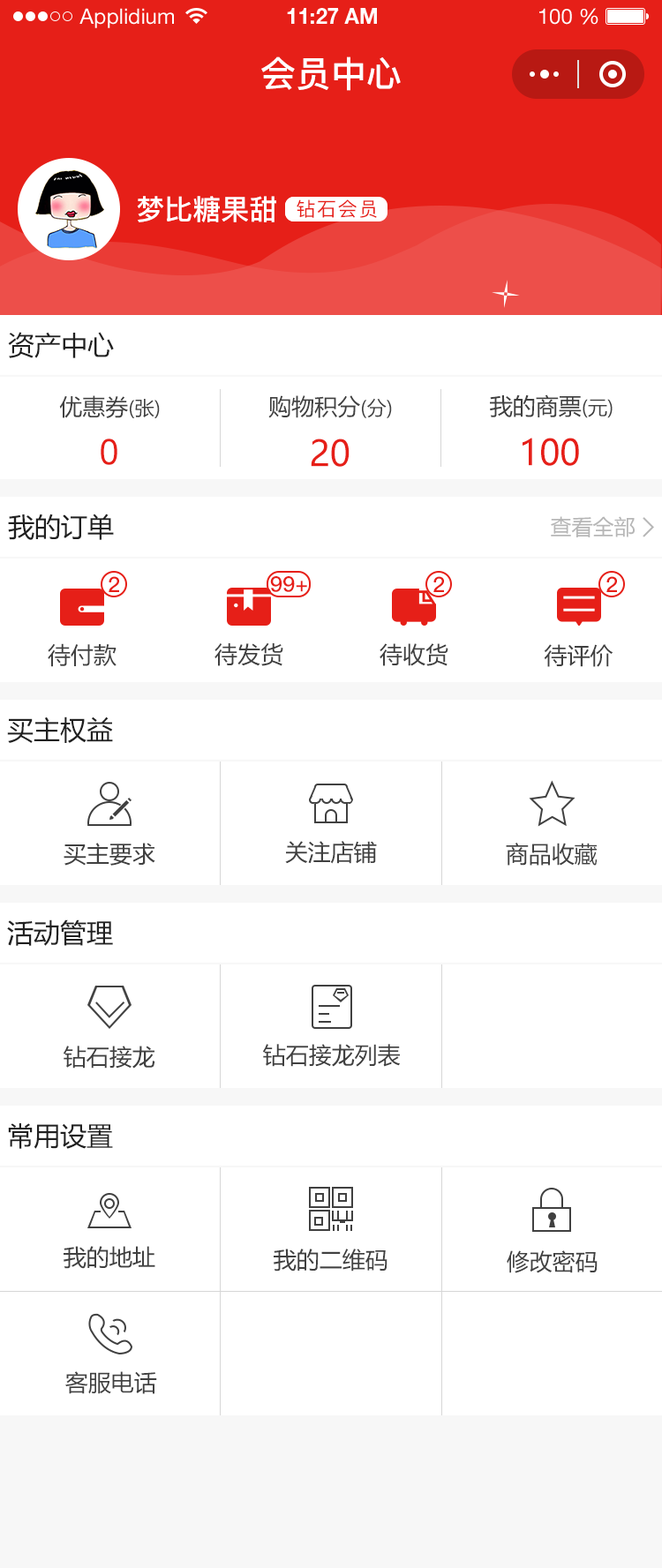
<style>
.page{position:relative;width:662px;height:1568px;background:#ffffff}
.page>*{position:absolute;margin:0}
.t1{font:21.2px "HelveticaNeueLTStd-Roman";color:#ffffff}
.t2{font:21.2px "HelveticaNeueLTStd-Bd";color:#ffffff}
.t3{font:35.3px "PingFang-SC-Bold";color:#ffffff;text-transform:uppercase}
.t4{font:28.2px "PingFang-SC-Bold";color:#ffffff;text-transform:uppercase}
.t5{font:19.4px "PingFang-SC-Medium";letter-spacing:0.08em;color:#e61f18}
.t6{font:26.5px "MicrosoftYaHei";color:#202020;text-transform:uppercase}
.t7{font:22.9px "MicrosoftYaHei";color:#404040;text-transform:uppercase}
.t8{font:19.4px "MicrosoftYaHei";color:#404040;text-transform:uppercase}
.t9{font:35.3px "MicrosoftYaHei";color:#e61f18;text-transform:uppercase}
.t10{font:35.3px "ArialMT";color:#e61f18;text-transform:uppercase}
.t11{font:21.2px "MicrosoftYaHei";color:#b6b6b6;text-transform:uppercase}
.t12{font:21.2px "PingFang-SC-Bold";color:#e61f18;text-transform:uppercase}
</style>
<div class="page">
<p class="t1" style="left:79px;top:8px;width:95px;height:20px">Applidium</p>
<p class="t2" style="left:287px;top:8px;width:90px;height:16px">11:27 AM</p>
<p class="t1" style="left:539px;top:8px;width:59px;height:17px">100 %</p>
<p class="t3" style="left:261px;top:56px;width:140px;height:35px">会员中心</p>
<p class="t4" style="left:137px;top:196px;width:139px;height:26px">梦比糖果甜</p>
<p class="t5" style="left:296px;top:199px;width:81px;height:19px">钻石会员</p>
<p class="t6" style="left:8px;top:332px;width:106px;height:26px">资产中心</p>
<p class="t7" style="left:59px;top:395px;width:101px;height:23px">优惠券<span class="t8">(张)</span></p>
<p class="t7" style="left:268px;top:395px;width:124px;height:23px">购物积分<span class="t8">(分)</span></p>
<p class="t7" style="left:490px;top:394px;width:122px;height:24px">我的商票<span class="t8">(元)</span></p>
<p class="t9" style="left:522px;top:438px;width:57px;height:28px">100</p>
<p class="t10" style="left:101px;top:439px;width:16px;height:26px">0</p>
<p class="t9" style="left:311px;top:439px;width:38px;height:28px">20</p>
<p class="t6" style="left:8px;top:514px;width:106px;height:26px">我的订单</p>
<p class="t11" style="left:551px;top:516px;width:83px;height:21px">查看全部</p>
<p class="t12" style="left:109px;top:576px;width:10px;height:16px">2</p>
<p class="t12" style="left:270px;top:576px;width:37px;height:16px">99+</p>
<p class="t12" style="left:433px;top:576px;width:11px;height:16px">2</p>
<p class="t12" style="left:606px;top:576px;width:11px;height:16px">2</p>
<p class="t7" style="left:48px;top:643px;width:68px;height:24px">待付款</p>
<p class="t7" style="left:214px;top:642px;width:69px;height:24px">待发货</p>
<p class="t7" style="left:379px;top:643px;width:69px;height:23px">待收货</p>
<p class="t7" style="left:544px;top:644px;width:68px;height:23px">待评价</p>
<p class="t6" style="left:7px;top:716px;width:106px;height:27px">买主权益</p>
<p class="t7" style="left:64px;top:843px;width:91px;height:23px">买主要求</p>
<p class="t7" style="left:285px;top:841px;width:92px;height:23px">关注店铺</p>
<p class="t7" style="left:506px;top:843px;width:91px;height:23px">商品收藏</p>
<p class="t6" style="left:7px;top:919px;width:106px;height:27px">活动管理</p>
<p class="t7" style="left:64px;top:1046px;width:91px;height:23px">钻石接龙</p>
<p class="t7" style="left:263px;top:1044px;width:138px;height:23px">钻石接龙列表</p>
<p class="t6" style="left:8px;top:1123px;width:105px;height:26px">常用设置</p>
<p class="t7" style="left:64px;top:1246px;width:91px;height:23px">我的地址</p>
<p class="t7" style="left:274px;top:1249px;width:113px;height:23px">我的二维码</p>
<p class="t7" style="left:506px;top:1250px;width:91px;height:23px">修改密码</p>
<p class="t7" style="left:65px;top:1371px;width:92px;height:23px">客服电话</p>
</div>
